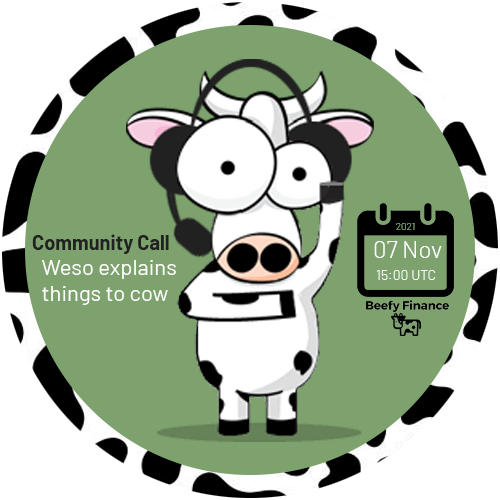
<style>
.page{position:relative;width:500px;height:500px;background:#7da26d}
.page>*{position:absolute;margin:0}
.t1{font:10px "Barlow-Light";color:#7da26d}
.t2{font:20px "Barlow-Bold";color:#212121}
.t3{font:24px "Barlow-Light";color:#ffffff}
.t4{font:22px "Barlow-Regular";color:#ffffff}
.t5{font:14px "Barlow-Light";color:#ffffff}
</style>
<div class="page">
<p class="t1" style="left:396px;top:223px;width:19px;height:7px">2021</p>
<p class="t2" style="left:32px;top:234px;width:137px;height:20px">Community Call</p>
<p class="t3" style="left:374px;top:241px;width:24px;height:17px">07</p>
<p class="t3" style="left:404px;top:241px;width:38px;height:17px">Nov</p>
<p class="t4" style="left:42px;top:260px;width:134px;height:45px">Weso explains <br>things to cow</p>
<p class="t5" style="left:376px;top:270px;width:60px;height:10px">15:00 UTC</p>
</div>
